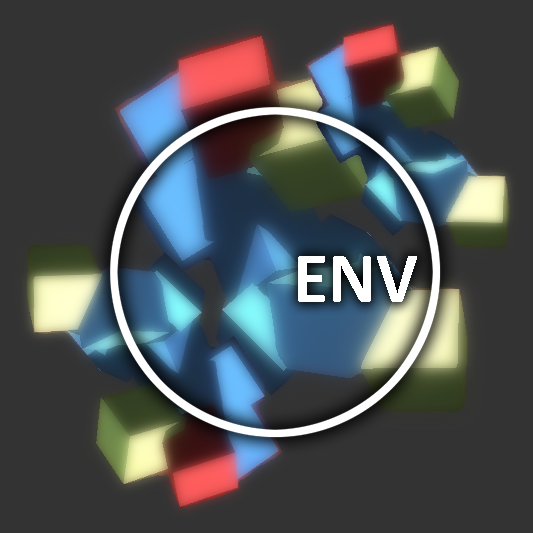
<style>
.page{position:relative;width:533px;height:533px;background:#333333}
.page>*{position:absolute;margin:0}
.t1{font:72px "Calibri-Bold";color:#ffffff}
</style>
<div class="page">
<p class="t1" style="left:298px;top:256px;width:119px;height:46px">ENV</p>
</div>
